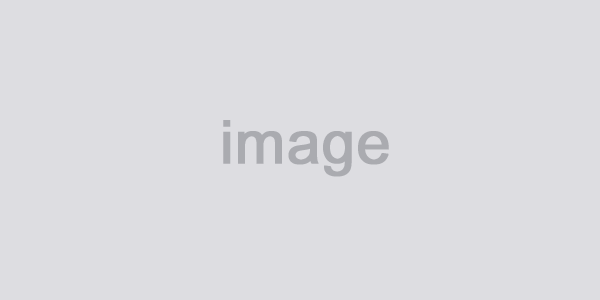
<style>
.page{position:relative;width:600px;height:300px;background:#dddde1}
.page>*{position:absolute;margin:0}
.t1{font:60px "ArialMT";color:#aaabb0;font-weight:bold}
</style>
<div class="page">
<p class="t1" style="left:223px;top:120px;width:166px;height:57px">image</p>
</div>
